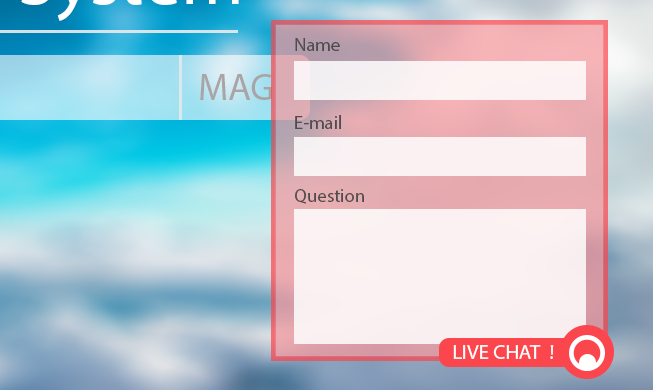
<style>
.page{position:relative;width:653px;height:390px}
.page>*{position:absolute;margin:0}
.t1{font:18.8px "MyriadPro-Regular";color:#4e4c4c}
.t2{font:37.5px "MyriadPro-Regular";color:#a9a5a5}
.t3{font:20.8px "MyriadPro-Regular";color:#ffffff}
</style>
<div class="page">
<p class="t1" style="left:295px;top:38px;width:45px;height:13px">Name</p>
<p class="t2" style="left:200px;top:74px;width:72px;height:26px">MAG</p>
<p class="t1" style="left:295px;top:115px;width:46px;height:14px">E-mail</p>
<p class="t1" style="left:295px;top:189px;width:69px;height:15px">Question</p>
<p class="t3" style="left:453px;top:345px;width:101px;height:14px">LIVE CHAT  !</p>
</div>
